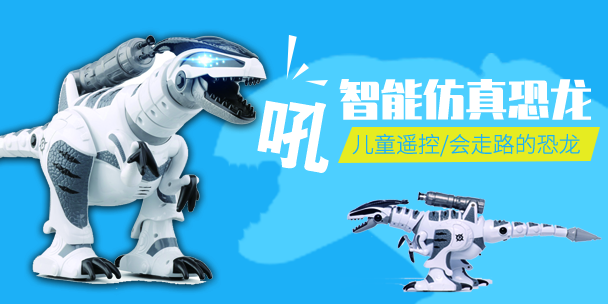
<style>
.page{position:relative;width:608px;height:304px;background:#1cb0f7}
.page>*{position:absolute;margin:0}
.t1{font:42px "ZhenyanGB-Regular";color:#ffffff}
.t2{font:79.6px "FZDHTJW--GB1-0";color:#ffffff}
.t3{font:22px "SourceHanSansCN-Light";color:#1caff8}
</style>
<div class="page">
<p class="t1" style="left:339px;top:79px;width:252px;height:41px">智能仿真恐龙</p>
<p class="t2" style="left:257px;top:100px;width:72px;height:73px;rotate:10deg">吼</p>
<p class="t3" style="left:352px;top:133px;width:228px;height:24px">儿童遥控/会走路的恐龙</p>
</div>
